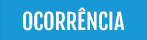
<style>
.page{position:relative;width:147px;height:40px;background:#1799d6}
.page>*{position:absolute;margin:0}
.t1{font:22px "FjallaOne";color:#ffffff;text-transform:uppercase}
</style>
<div class="page">
<p class="t1" style="left:23px;top:7px;width:102px;height:24px">OCORRÊNCIA</p>
</div>
